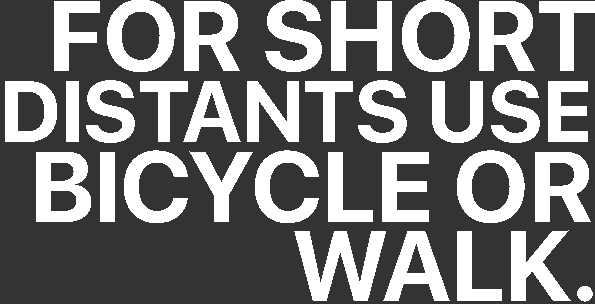
<style>
.page{position:relative;width:595px;height:304px;background:#333333}
.page>*{position:absolute;margin:0}
.t1{font:100px "SFProDisplay-Bold";color:#ffffff;text-transform:uppercase}
.t2{font:86.5px "SFProDisplay-Bold";color:#ffffff;text-transform:uppercase}
</style>
<div class="page">
<p class="t1" style="left:54px;top:0px;width:541px;height:72px">for short</p>
<p class="t2" style="left:5px;top:80px;width:583px;height:63px">distants use</p>
<p class="t1" style="left:36px;top:150px;width:555px;height:73px">bicycle or</p>
<p class="t1" style="left:294px;top:230px;width:299px;height:72px">walk.</p>
</div>
